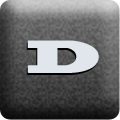
<style>
.page{position:relative;width:120px;height:120px}
.page>*{position:absolute;margin:0}
.t1{font:43.2px "BlackoakStd";letter-spacing:0.005em;color:#e0e6eb;scale:0.92 1}
</style>
<div class="page">
<p class="t1" style="left:27px;top:40px;width:72px;height:33px">D</p>
</div>
